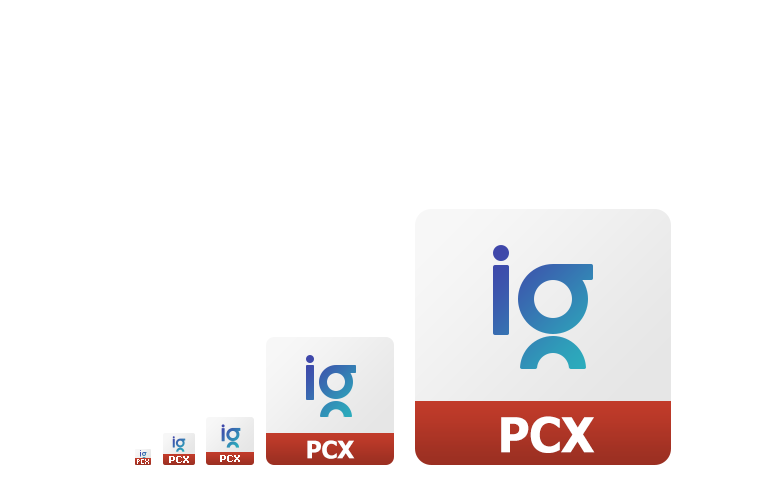
<style>
.page{position:relative;width:768px;height:480px;background:#ffffff}
.page>*{position:absolute;margin:0}
.t1{font:48px "Tahoma-Bold";color:#ffffff}
.t2{font:24px "Tahoma-Bold";color:#ffffff}
.t3{font:10px "Tahoma-Bold";color:#ffffff}
</style>
<div class="page">
<p class="t1" style="left:501px;top:416px;width:94px;height:37px">PCX</p>
<p class="t2" style="left:307px;top:440px;width:48px;height:19px">PCX</p>
<p class="t3" style="left:169px;top:456px;width:20px;height:7px">PCX</p>
<p class="t3" style="left:220px;top:455px;width:20px;height:7px">PCX</p>
</div>
